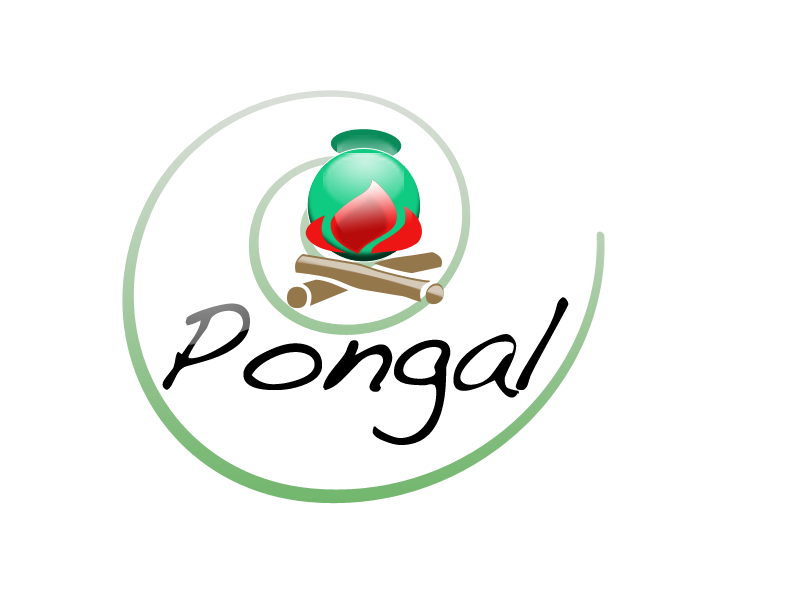
<style>
.page{position:relative;width:800px;height:600px;background:#ffffff}
.page>*{position:absolute;margin:0}
.t1{font:132.6px "Handwriting-Dakota";color:#000000}
</style>
<div class="page">
<p class="t1" style="left:162px;top:297px;width:407px;height:148px">Pongal</p>
</div>
